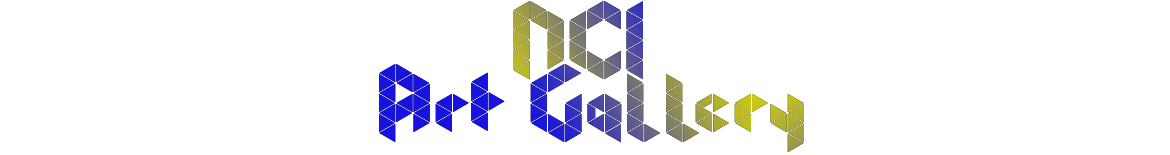
<style>
.page{position:relative;width:1170px;height:155px;background:#ffffff}
.page>*{position:absolute;margin:0}
.t1{font:90px "Prism"}
</style>
<div class="page">
<p class="t1" style="left:513px;top:1px;width:130px;height:79px">NCI</p>
<p class="t1" style="left:379px;top:64px;width:425px;height:88px">Art Gallery</p>
</div>
